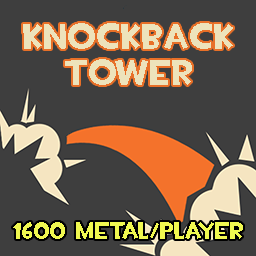
<style>
.page{position:relative;width:256px;height:256px;background:#3e3e3e}
.page>*{position:absolute;margin:0}
.t1{font:36px/36px "TF2Build";color:#ede3bb}
.t2{font:24px "TF2Build";color:#f0f850}
</style>
<div class="page">
<p class="t1" style="left:23px;top:23px;width:210px;height:62px;text-align:center">KNOCKBACK<br>Tower</p>
<p class="t2" style="left:13px;top:222px;width:230px;height:17px">1600 metal/player</p>
</div>
